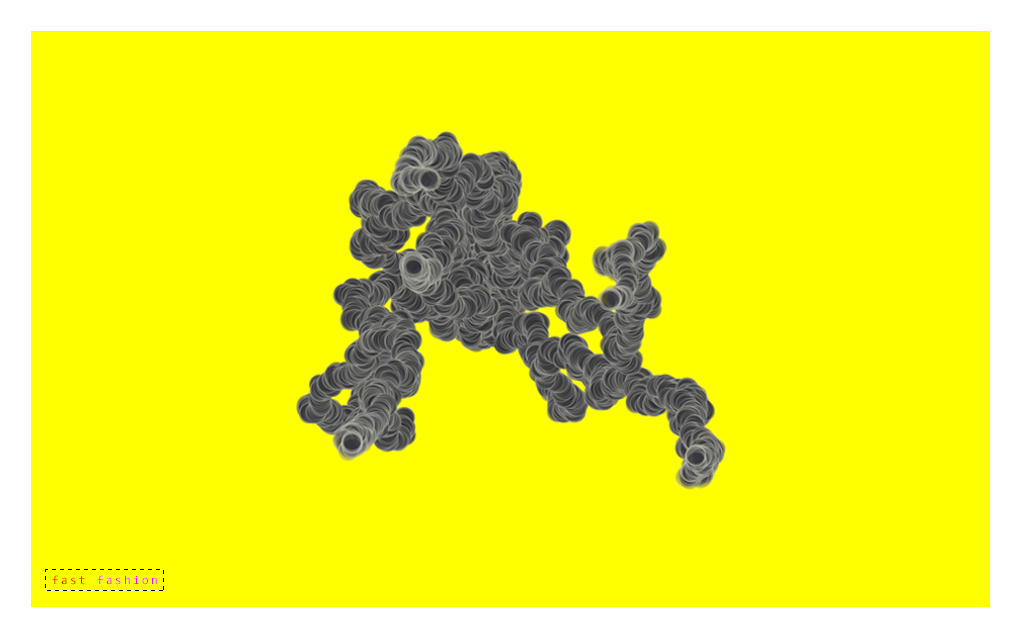
<style>
.page{position:relative;width:1021px;height:638px;background:#ffff00}
.page>*{position:absolute;margin:0}
.t1{font:12px "Consolas";letter-spacing:0.2em;color:#ff1800}
.t2{font:12px "Consolas";letter-spacing:0.2em;color:#ff00fc}
.t3{font:12px "Consolas";letter-spacing:0.2em;color:#ff00ff}
</style>
<div class="page">
<p class="t1" style="left:52px;top:575px;width:105px;height:10px">fast <span class="t2">fash</span><span class="t3">i</span><span class="t2">on</span></p>
</div>
